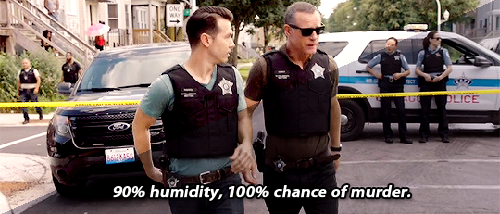
<style>
.page{position:relative;width:500px;height:214px}
.page>*{position:absolute;margin:0}
.t1{font:16.7px "MyriadPro-Semibold";color:#ffffff;font-weight:bold;font-style:italic}
</style>
<div class="page">
<p class="t1" style="left:113px;top:185px;width:298px;height:16px">90% humidity, 100% chance of murder.</p>
</div>
